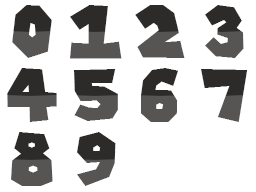
<style>
.page{position:relative;width:256px;height:192px;background:#ffffff}
.page>*{position:absolute;margin:0}
.t1{font:72px "SuperMarioGalaxy";letter-spacing:-0.01em}
.t2{font:72px "SuperMarioGalaxy";letter-spacing:-0.01em;color:#2d2b29}
</style>
<div class="page">
<p class="t1" style="left:12px;top:5px;width:40px;height:53px">0</p>
<p class="t1" style="left:70px;top:5px;width:52px;height:54px">1</p>
<p class="t1" style="left:135px;top:5px;width:50px;height:53px">2</p>
<p class="t1" style="left:205px;top:5px;width:39px;height:53px">3</p>
<p class="t1" style="left:7px;top:68px;width:50px;height:54px">4</p>
<p class="t1" style="left:74px;top:69px;width:44px;height:52px">5</p>
<p class="t1" style="left:141px;top:68px;width:38px;height:54px">6</p>
<p class="t2" style="left:201px;top:69px;width:47px;height:53px">7</p>
<p class="t1" style="left:11px;top:132px;width:42px;height:54px">8</p>
<p class="t2" style="left:77px;top:132px;width:39px;height:54px">9</p>
</div>
